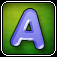
<style>
.page{position:relative;width:57px;height:57px}
.page>*{position:absolute;margin:0}
.t1{font:50px "Porkys";color:#8f8fee}
</style>
<div class="page">
<p class="t1" style="left:10px;top:9px;width:35px;height:40px">A</p>
</div>
